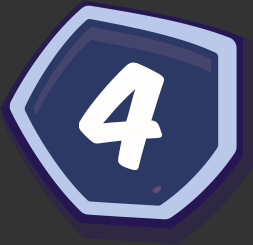
<style>
.page{position:relative;width:253px;height:245px;background:#2c3964}
.page>*{position:absolute;margin:0}
.t1{font:120px "KomikaAxis";color:#fffefd}
</style>
<div class="page">
<p class="t1" style="left:79px;top:62px;width:85px;height:108px">4</p>
</div>
